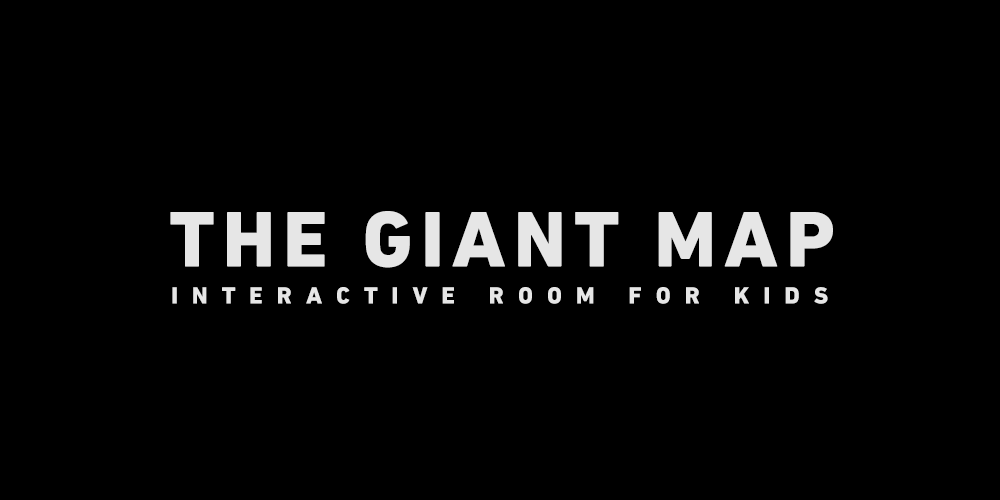
<style>
.page{position:relative;width:1000px;height:500px;background:#000000}
.page>*{position:absolute;margin:0}
.t1{font:80px "DINNextLTPro-Heavy";letter-spacing:0.1em;color:#e6e6e6}
.t2{font:24px "DINNextLTPro-Heavy";letter-spacing:0.585em;color:#e6e6e6}
</style>
<div class="page">
<p class="t1" style="left:170px;top:211px;width:663px;height:57px">THE GIANT MAP</p>
<p class="t2" style="left:172px;top:287px;width:656px;height:17px">INTERACTIVE ROOM FOR KIDS</p>
</div>
